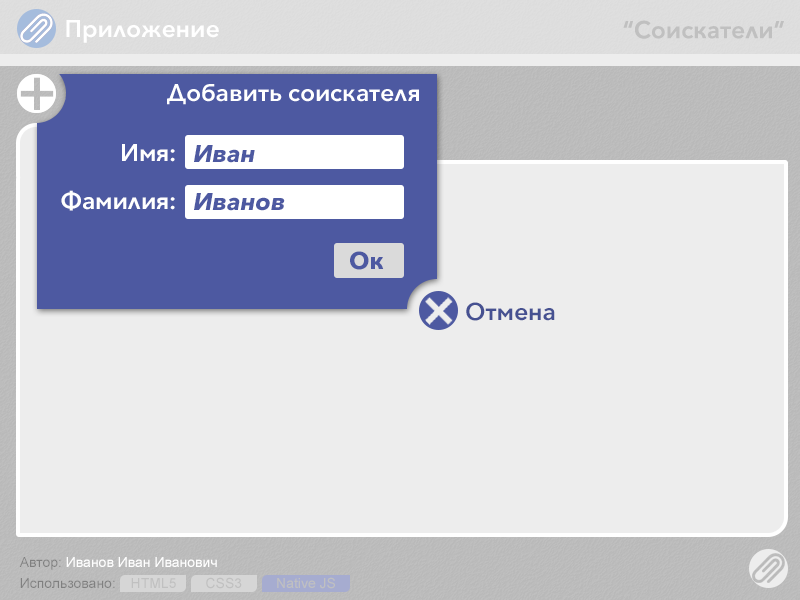
<style>
.page{position:relative;width:800px;height:600px;background:#ededed}
.page>*{position:absolute;margin:0}
.t1{font:24px "AvenirNext-DemiBold";color:#ffffff}
.t2{font:24px "AvenirNext-DemiBold";color:#c0c0c0}
.t3{font:24px/48px "AvenirNext-DemiBold";color:#ffffff}
.t4{font:24px/36px "AvenirNext-DemiBold";color:#ffffff}
.t5{font:24px/48px "AvenirNext-BoldItalic";color:#4d59a1}
.t6{font:24px/36px "AvenirNext-BoldItalic";color:#4d59a1}
.t7{font:24px "AvenirNext-Bold";color:#4d59a1}
.t8{font:24px "AvenirNext-DemiBold";color:#465191}
.t9{font:14px "ArialMT";color:#ffffff}
.t10{font:14px "ArialMT";color:#000000}
.t11{font:14px "ArialMT";color:#808080}
.t12{font:14px "ArialMT";color:#c0c0c0}
</style>
<div class="page">
<p class="t1" style="left:66px;top:20px;width:153px;height:23px">Приложение</p>
<p class="t2" style="left:623px;top:20px;width:161px;height:19px">“Соискатели”</p>
<p class="t1" style="left:167px;top:84px;width:252px;height:21px">Добавить соискателя</p>
<p class="t3" style="left:61px;top:144px;width:114px;height:67px;text-align:right"><span class="t4">Имя</span>:<br>Фамилия<span class="t4">:</span></p>
<p class="t5" style="left:194px;top:145px;width:91px;height:66px"><span class="t6">Иван</span><br>Иванов</p>
<p class="t7" style="left:350px;top:251px;width:34px;height:19px">Ок</p>
<p class="t8" style="left:466px;top:302px;width:89px;height:19px">Отмена</p>
<p class="t9" style="left:19px;top:557px;width:198px;height:13px"><span class="t10">Автор: </span>Иванов Иван Иванович</p>
<p class="t11" style="left:20px;top:578px;width:95px;height:10px">Использовано:</p>
<p class="t12" style="left:131px;top:578px;width:45px;height:10px">HTML5</p>
<p class="t12" style="left:206px;top:577px;width:36px;height:12px">CSS3</p>
<p class="t12" style="left:277px;top:577px;width:58px;height:12px">Native JS</p>
</div>
